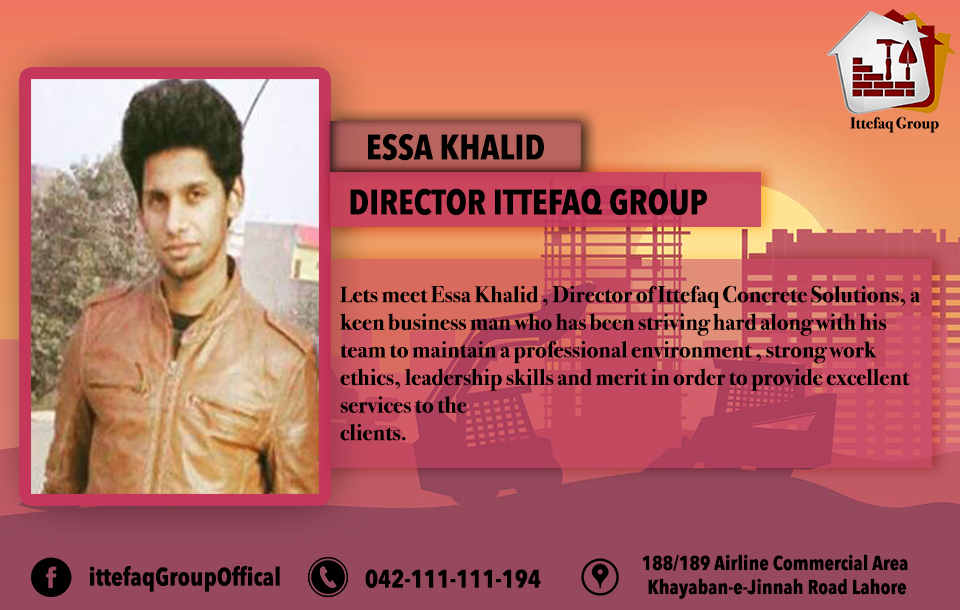
<style>
.page{position:relative;width:960px;height:610px}
.page>*{position:absolute;margin:0}
.t1{font:35px "AvenirNextCondensed-Bold";color:#000000}
.t2{font:23px "BodoniSvtyTwoOSITCTT-Bold";color:#000000}
.t3{font:22px "BodoniSvtyTwoOSITCTT-Bold";color:#000000}
.t4{font:20px "AvenirNextCondensed-Bold";color:#000000}
.t5{font:25px "AvenirNextCondensed-Bold";color:#000000}
</style>
<div class="page">
<p class="t1" style="left:368px;top:134px;width:176px;height:27px">ESSA KHALID</p>
<p class="t1" style="left:350px;top:188px;width:357px;height:27px">DIRECTOR ITTEFAQ GROUP</p>
<p class="t2" style="left:340px;top:285px;width:581px;height:156px"><span class="t3"><br>L</span>ets meet Essa Khalid , Director of Ittefaq Concrete Solutions, a keen business man who has been striving hard along with his team to maintain a professional environment , strong work ethics, leadership skills and merit in order to provide excellent services to the <br>clients.</p>
<p class="t4" style="left:642px;top:554px;width:266px;height:45px;text-align:center">188/189 Airline Commercial Area <br>Khayaban-e-Jinnah Road Lahore</p>
<p class="t5" style="left:90px;top:565px;width:190px;height:27px">ittefaqGroupOffical</p>
<p class="t5" style="left:365px;top:569px;width:176px;height:19px">042-111-111-194</p>
</div>
